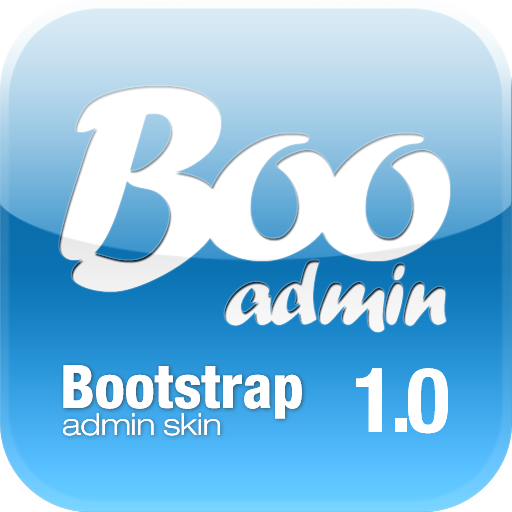
<style>
.page{position:relative;width:512px;height:512px}
.page>*{position:absolute;margin:0}
.t1{font:260px "ForteMT";letter-spacing:-0.1em;color:#ffffff}
.t2{font:90px "ForteMT";letter-spacing:-0.04em;color:#ffffff}
.t3{font:60px "HelveticaNeueLTPro-HvCn";color:#ffffff}
.t4{font:90px "HelveticaNeueLTPro-BdCn";letter-spacing:-0.06em;color:#ffffff}
.t5{font:30px "HelveticaNeueLTPro-LtEx";color:#ffffff}
</style>
<div class="page">
<p class="t1" style="left:59px;top:85px;width:391px;height:207px">Boo</p>
<p class="t2" style="left:224px;top:260px;width:222px;height:72px">admin</p>
<p class="t3" style="left:63px;top:365px;width:239px;height:54px">Bootstrap</p>
<p class="t4" style="left:356px;top:368px;width:92px;height:66px">1.0</p>
<p class="t5" style="left:63px;top:413px;width:157px;height:23px">admin skin</p>
</div>
